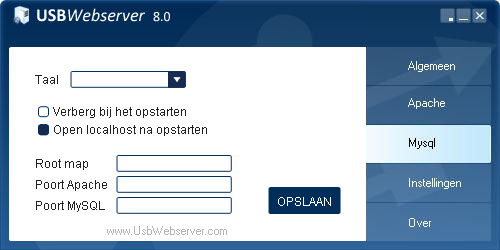
<style>
.page{position:relative;width:500px;height:250px;background:#ffffff}
.page>*{position:absolute;margin:0}
.t1{font:12px/18px "ArialMT";color:#202020}
.t2{font:12px/32px "ArialMT";color:#202020}
.t3{font:12px/33.3px "ArialMT";color:#202020}
.t4{font:12px/21.3px "ArialMT";color:#202020}
.t5{font:12px "ArialMT";color:#ffffff}
</style>
<div class="page">
<p class="t1" style="left:35px;top:75px;width:172px;height:137px">Taal<br>      <span class="t2">Verberg bij het opstarten<br></span>      Open localhost na opstarten<br><span class="t3">Root map<br></span><span class="t4">Poort Apache<br>Poort MySQL</span></p>
<p class="t5" style="left:278px;top:197px;width:53px;height:9px">OPSLAAN</p>
</div>
